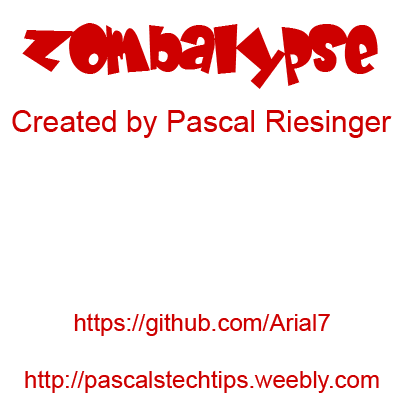
<style>
.page{position:relative;width:400px;height:400px;background:#ffffff}
.page>*{position:absolute;margin:0}
.t1{font:60px "BabyKruffy";color:#ce0000}
.t2{font:30px "ArialMT";color:#ce0000}
.t3{font:24px "ArialMT";color:#ce0000}
</style>
<div class="page">
<p class="t1" style="left:22px;top:23px;width:356px;height:66px">Zombalypse</p>
<p class="t2" style="left:12px;top:110px;width:380px;height:28px">Created by Pascal Riesinger</p>
<p class="t3" style="left:25px;top:313px;width:354px;height:80px;text-align:center">https://github.com/Arial7<br><br>http://pascalstechtips.weebly.com</p>
</div>
